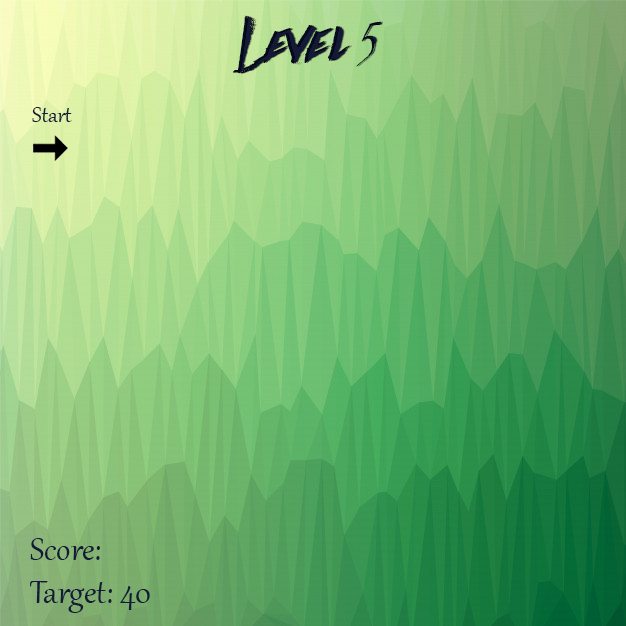
<style>
.page{position:relative;width:626px;height:626px}
.page>*{position:absolute;margin:0}
.t1{font:60px "Againts";color:#060b23}
.t2{font:60px "Againts";color:#131936}
.t3{font:26.7px "Gabriola";color:#131936}
.t4{font:40px "Gabriola";color:#131936}
</style>
<div class="page">
<p class="t1" style="left:233px;top:15px;width:148px;height:59px">Level 5</p>
<p class="t2" style="left:235px;top:15px;width:148px;height:59px">Level 5</p>
<p class="t3" style="left:32px;top:107px;width:40px;height:15px">Start</p>
<p class="t4" style="left:30px;top:538px;width:70px;height:22px">Score:</p>
<p class="t4" style="left:30px;top:581px;width:120px;height:32px">Target: 40</p>
</div>
